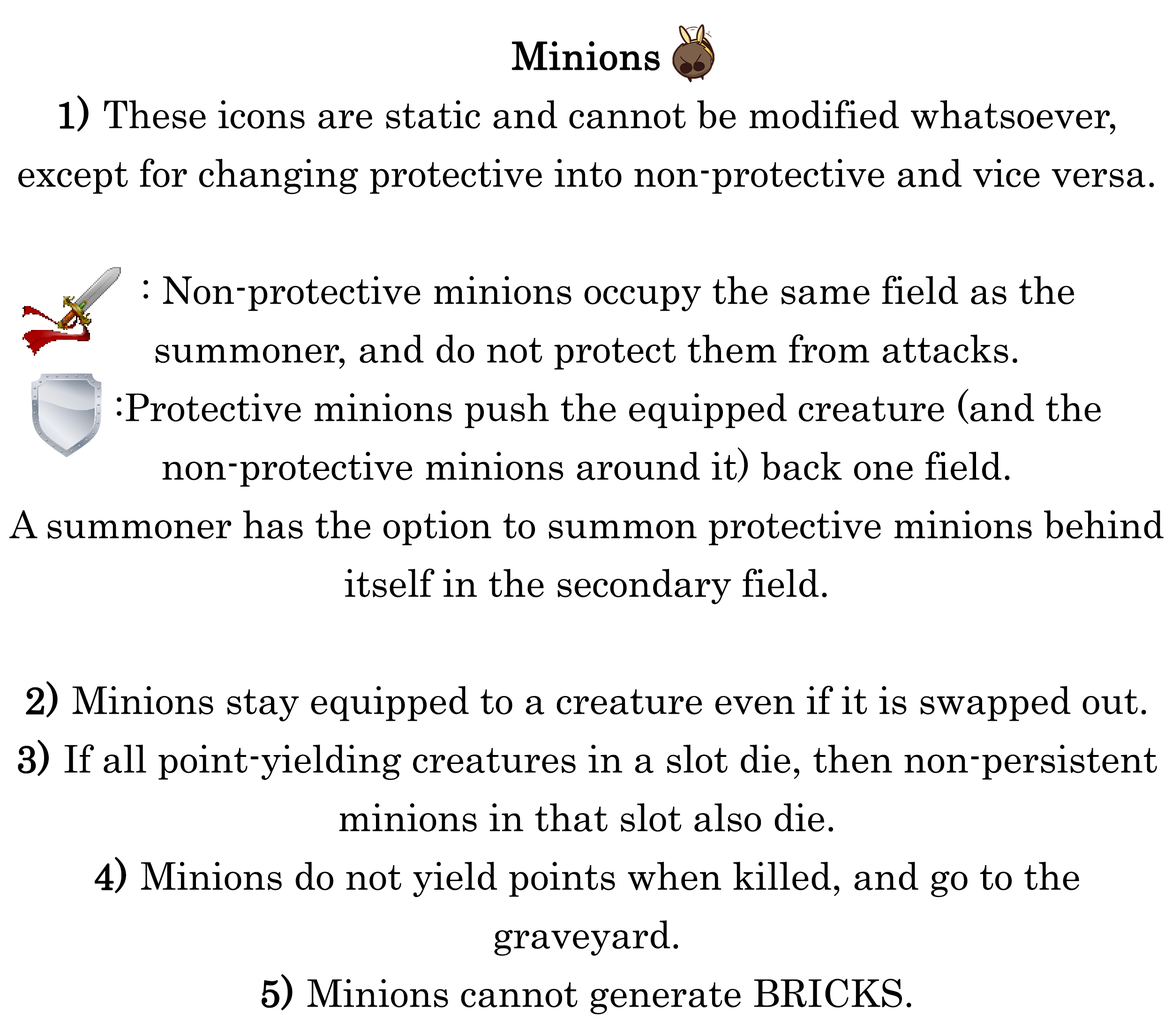
<style>
.page{position:relative;width:1172px;height:1017px;background:#ffffff}
.page>*{position:absolute;margin:0}
.t1{font:65.1px/58.6px "Century";color:#000000}
.t2{font:65.1px/58.6px "Century";color:#000000;font-weight:bold}
</style>
<div class="page">
<p class="t1" style="left:9px;top:41px;width:1155px;height:974px;text-align:center"><span class="t2">Minions<br>1) </span>These icons are static and cannot be modified whatsoever, except for changing protective into non-protective and vice versa.<br><br>    : Non-protective minions occupy the same field as the summoner, and do not protect them from attacks.<br>    :Protective minions push the equipped creature (and the non-protective minions around it) back one field.<br>A summoner has the option to summon protective minions behind itself in the secondary field.<br><br><span class="t2">2) </span>Minions stay equipped to a creature even if it is swapped out.<br><span class="t2">3) </span>If all point-yielding creatures in a slot die, then non-persistent minions in that slot also die.<br><span class="t2">4) </span>Minions do not yield points when killed, and go to the graveyard.<br><span class="t2">5) </span>Minions cannot generate BRICKS.</p>
</div>
